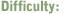
<style>
.page{position:relative;width:72px;height:14px;background:#ffffff}
.page>*{position:absolute;margin:0}
.t1{font:13.9px "BellGothicStd-Black";letter-spacing:-0.025em;color:#85a06e}
</style>
<div class="page">
<p class="t1" style="left:1px;top:0px;width:58px;height:14px">Difficulty:</p>
</div>
